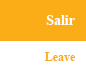
<style>
.page{position:relative;width:86px;height:72px;background:#fbad18}
.page>*{position:absolute;margin:0}
.t1{font:14px "TimesNewRomanPS-BoldMT";color:#ffffff}
.t2{font:12px "TimesNewRomanPS-BoldMT";color:#fbad18}
</style>
<div class="page">
<p class="t1" style="left:46px;top:15px;width:29px;height:10px">Salir</p>
<p class="t2" style="left:44px;top:52px;width:32px;height:9px">Leave</p>
</div>
